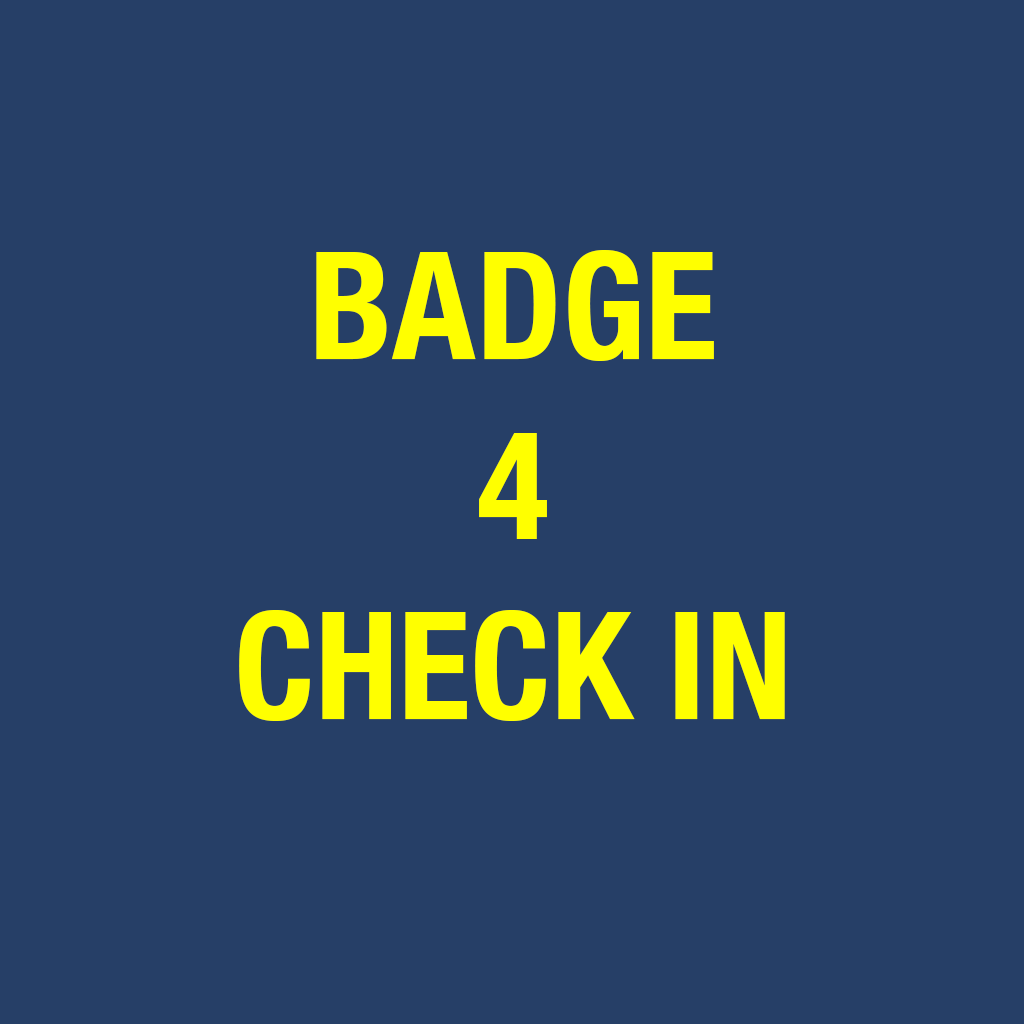
<style>
.page{position:relative;width:1024px;height:1024px;background:#263f67}
.page>*{position:absolute;margin:0}
.t1{font:150px "HelveticaNeue-CondensedBold";color:#ffff00;text-transform:uppercase}
</style>
<div class="page">
<p class="t1" style="left:239px;top:250px;width:546px;height:471px;text-align:center">Badge<br>4<br>check in</p>
</div>
